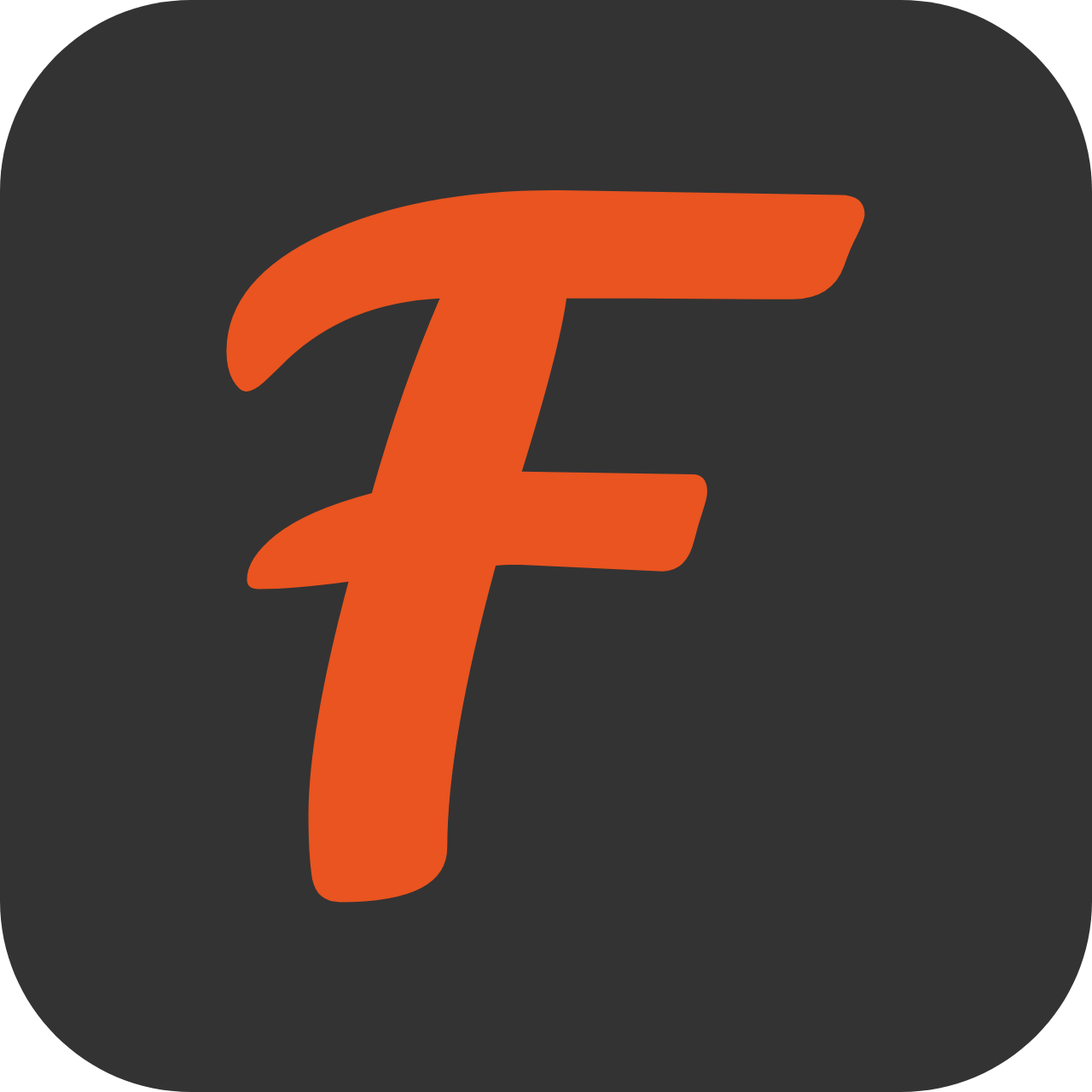
<style>
.page{position:relative;width:1092px;height:1092px;background:#333333}
.page>*{position:absolute;margin:0}
.t1{font:931.7px "LeckerliOne-Regular";color:#e95420}
</style>
<div class="page">
<p class="t1" style="left:226px;top:190px;width:639px;height:713px">F</p>
</div>
